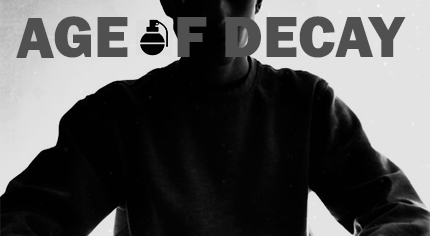
<style>
.page{position:relative;width:430px;height:236px}
.page>*{position:absolute;margin:0}
.t1{font:60px "FranklinGothic-Heavy";color:#515050}
</style>
<div class="page">
<p class="t1" style="left:16px;top:16px;width:390px;height:42px">AGE   F DECAY</p>
</div>
